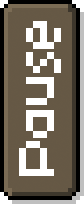
<style>
.page{position:relative;width:84px;height:204px;background:#655845}
.page>*{position:absolute;margin:0}
.t1{font:49px "7px4bus";letter-spacing:-0.05em;color:#ffffff}
</style>
<div class="page">
<p class="t1" style="left:19px;top:21px;width:42px;height:155px;rotate:-90deg">Pause</p>
</div>
